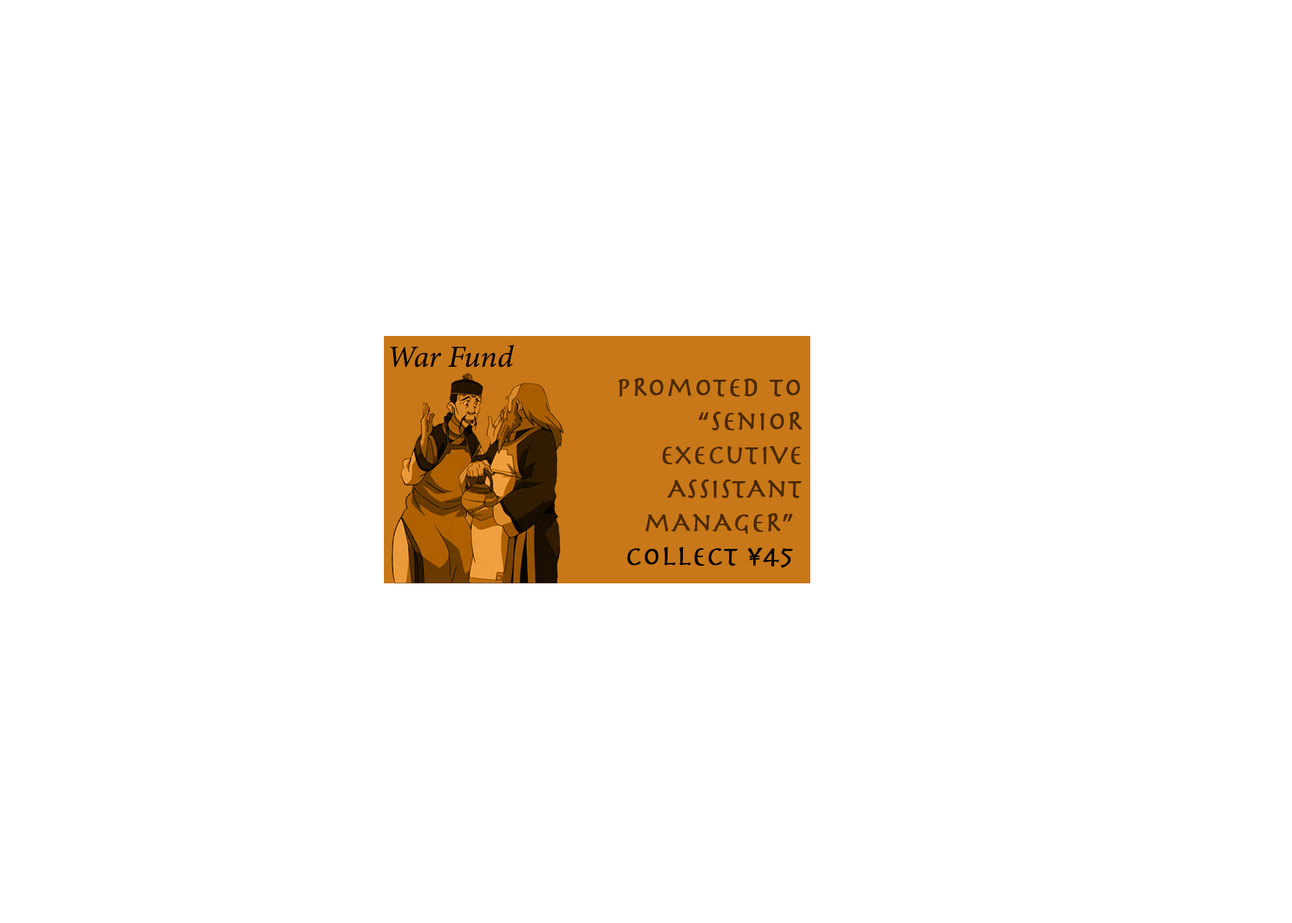
<style>
.page{position:relative;width:1292px;height:923px;background:#ffffff}
.page>*{position:absolute;margin:0}
.t1{font:30.8px "MinionConceptItalic-MediumItalic";color:#000000;font-weight:bold}
.t2{font:28.2px "Herculanum";color:#4d310e;font-weight:bold}
.t3{font:28.2px "Herculanum";color:#000000;font-weight:bold}
</style>
<div class="page">
<p class="t1" style="left:390px;top:345px;width:124px;height:22px">War Fund</p>
<p class="t2" style="left:618px;top:378px;width:184px;height:190px;text-align:right">pRomoted to<br>“senioR<br> executive<br>AssistAnt<br> mAnAgeR” <br><span class="t3">Collect ¥45</span></p>
</div>
